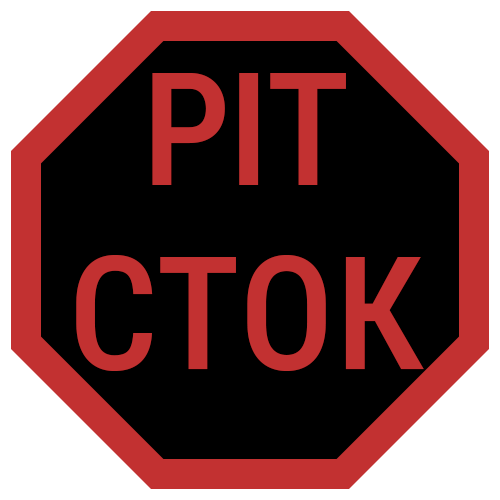
<style>
.page{position:relative;width:500px;height:500px;background:#000000}
.page>*{position:absolute;margin:0}
.t1{font:158.3px/183.3px "RobotoCondensed-Medium";letter-spacing:0.005em;color:#c23131}
.t2{font:158.3px/183.3px "RobotoCondensed-Medium";letter-spacing:-0.02em;color:#c23131}
</style>
<div class="page">
<p class="t1" style="left:76px;top:73px;width:348px;height:298px;text-align:center"><span class="t2">PIT<br></span>СТОК</p>
</div>
